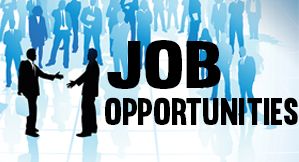
<style>
.page{position:relative;width:299px;height:162px}
.page>*{position:absolute;margin:0}
.t1{font:65.9px "Muro-Regular";color:#000000;scale:1.2 1}
.t2{font:37.5px "Muro-Regular";color:#000000;scale:0.9 1}
</style>
<div class="page">
<p class="t1" style="left:107px;top:40px;width:114px;height:49px">JOB</p>
<p class="t2" style="left:105px;top:97px;width:193px;height:28px">OPPORTUNITIES</p>
</div>
